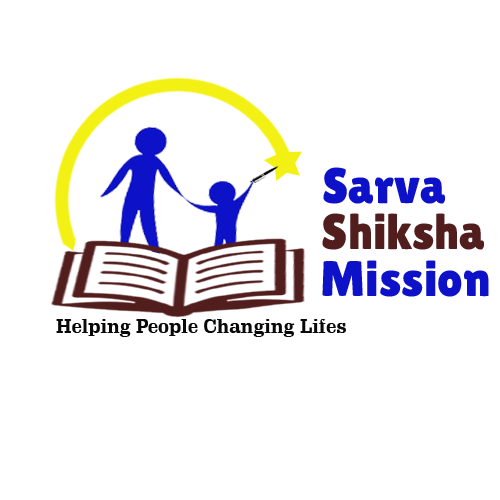
<style>
.page{position:relative;width:500px;height:500px;background:#ffffff}
.page>*{position:absolute;margin:0}
.t1{font:50px "LilitaOne";color:#0d12c9}
.t2{font:50px "LilitaOne";color:#511d1d}
.t3{font:19px "SchadowBT-Bold";color:#090909}
</style>
<div class="page">
<p class="t1" style="left:323px;top:167px;width:123px;height:37px">Sarva</p>
<p class="t2" style="left:322px;top:213px;width:163px;height:37px">Shiksha</p>
<p class="t1" style="left:322px;top:260px;width:167px;height:37px">Mission</p>
<p class="t3" style="left:56px;top:319px;width:290px;height:18px">Helping People Changing Lifes</p>
</div>
